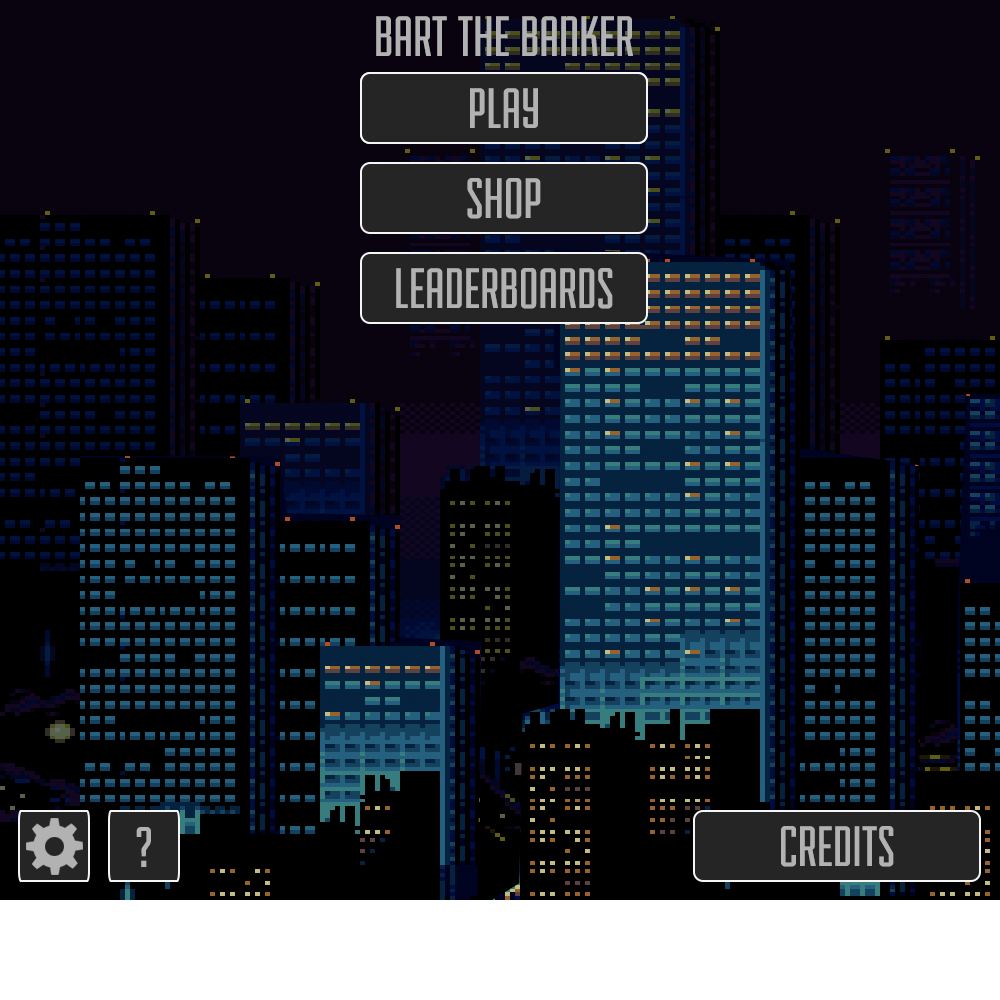
<style>
.page{position:relative;width:1000px;height:1000px;background:#000000}
.page>*{position:absolute;margin:0}
.t1{font:60px "Fairview-Regular";color:#b2b2b2}
</style>
<div class="page">
<p class="t1" style="left:376px;top:16px;width:257px;height:40px">BART THE BANKER</p>
<p class="t1" style="left:470px;top:88px;width:68px;height:40px">PLAY</p>
<p class="t1" style="left:470px;top:88px;width:68px;height:40px">PLAY</p>
<p class="t1" style="left:467px;top:178px;width:74px;height:41px">SHOP</p>
<p class="t1" style="left:396px;top:268px;width:217px;height:41px">LEADERBOARDS</p>
<p class="t1" style="left:136px;top:827px;width:15px;height:40px">?</p>
<p class="t1" style="left:781px;top:826px;width:113px;height:41px">CREDITS</p>
</div>
